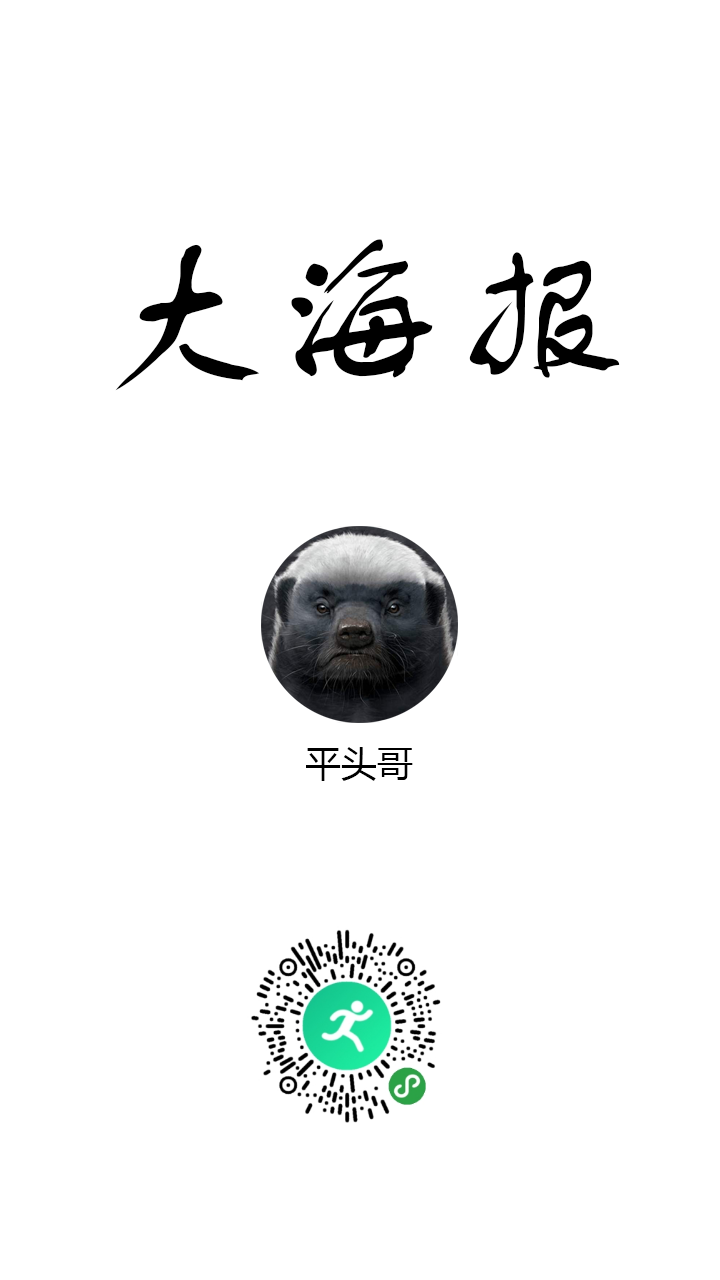
<style>
.page{position:relative;width:720px;height:1280px;background:#ffffff}
.page>*{position:absolute;margin:0}
.t1{font:180px "FZSTK--GBK1-0";color:#000000}
.t2{font:36px "MicrosoftYaHei";color:#000000}
</style>
<div class="page">
<p class="t1" style="left:115px;top:239px;width:505px;height:152px">大海报</p>
<p class="t2" style="left:306px;top:747px;width:107px;height:34px">平头哥</p>
</div>
